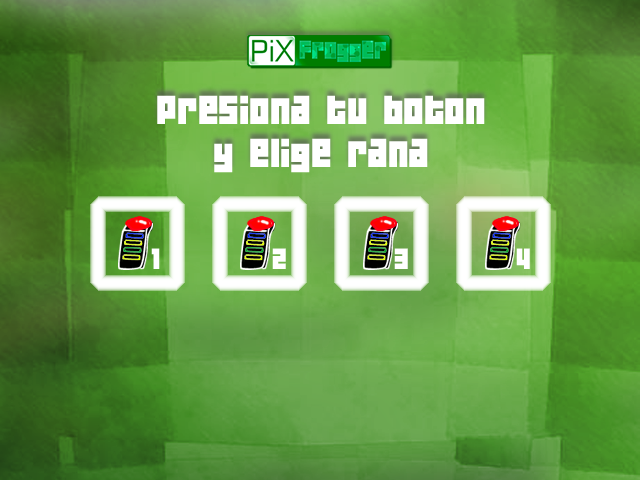
<style>
.page{position:relative;width:640px;height:480px}
.page>*{position:absolute;margin:0}
.t1{font:36px "04b19";color:#ffffff}
.t2{font:26px "04b19";color:#ffffff}
</style>
<div class="page">
<p class="t1" style="left:157px;top:95px;width:328px;height:78px;text-align:center">Presiona tu boton<br>y elige rana</p>
<p class="t2" style="left:151px;top:248px;width:9px;height:21px">1</p>
<p class="t2" style="left:272px;top:248px;width:14px;height:21px">2</p>
<p class="t2" style="left:394px;top:248px;width:14px;height:21px">3</p>
<p class="t2" style="left:516px;top:248px;width:14px;height:21px">4</p>
</div>
